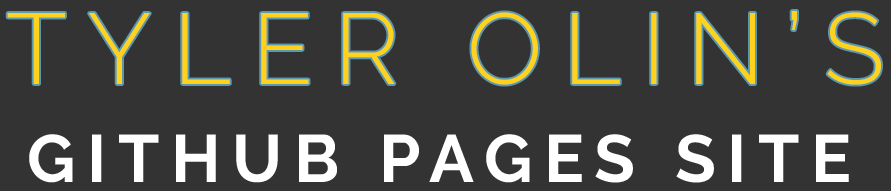
<style>
.page{position:relative;width:891px;height:191px;background:#333333}
.page>*{position:absolute;margin:0}
.t1{font:100px "Raleway-Light";letter-spacing:0.21em;color:#ffd21e}
.t2{font:66.7px "Raleway-Bold";letter-spacing:0.175em;color:#ffffff}
</style>
<div class="page">
<p class="t1" style="left:7px;top:11px;width:874px;height:74px">TYLER OLIN’S</p>
<p class="t2" style="left:29px;top:134px;width:820px;height:49px">GITHUB PAGES SITE</p>
</div>
